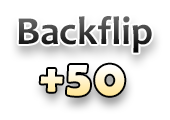
<style>
.page{position:relative;width:170px;height:120px;background:#ffffff}
.page>*{position:absolute;margin:0}
.t1{font:40px "Candara-Bold"}
.t2{font:50px "BerlinSansFBDemi-Bold";letter-spacing:0.05em}
</style>
<div class="page">
<p class="t1" style="left:18px;top:16px;width:134px;height:37px">Backflip</p>
<p class="t2" style="left:40px;top:64px;width:85px;height:32px">+50</p>
</div>
